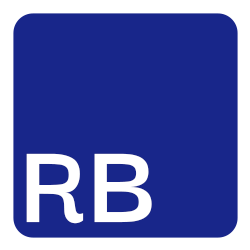
<style>
.page{position:relative;width:250px;height:250px;background:#18268a}
.page>*{position:absolute;margin:0}
.t1{font:120.8px "DarkerGrotesque-Bold";letter-spacing:0.01em;color:#ffffff;text-transform:uppercase}
</style>
<div class="page">
<p class="t1" style="left:26px;top:153px;width:126px;height:71px">RB</p>
</div>
